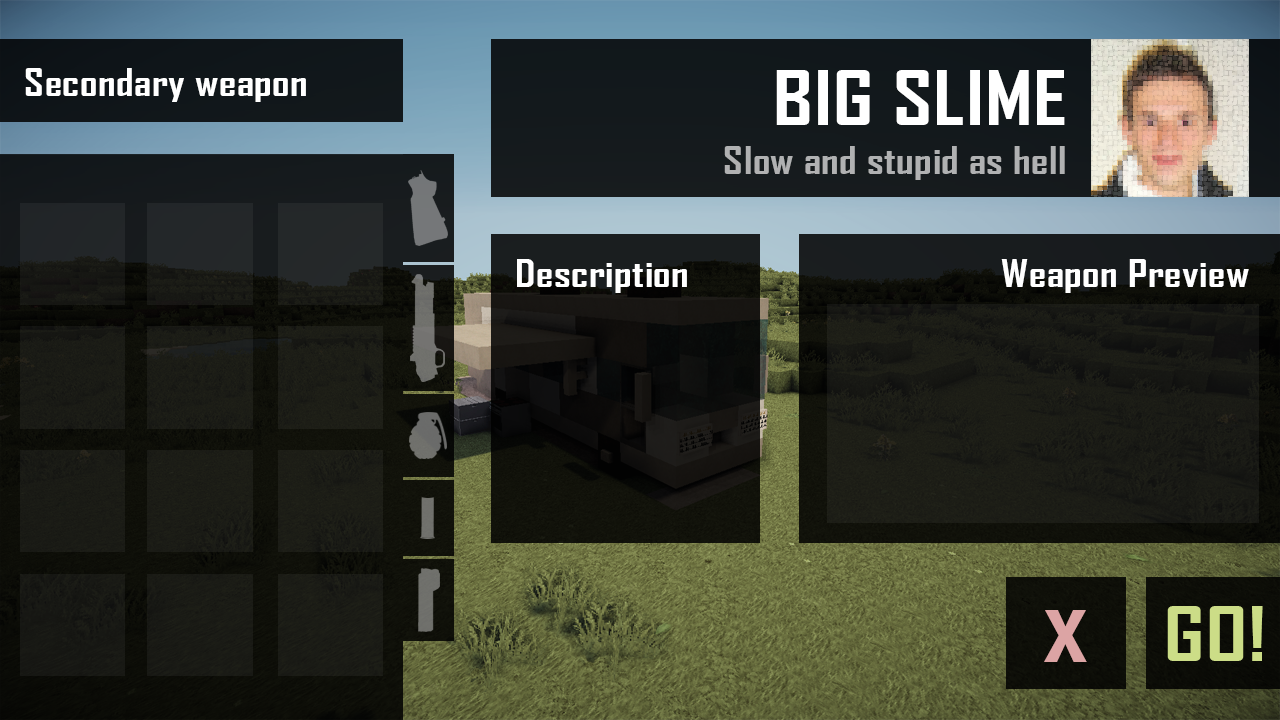
<style>
.page{position:relative;width:1280px;height:720px}
.page>*{position:absolute;margin:0}
.t1{font:36px "AgencyFB-Bold";letter-spacing:0.01em;color:#ffffff;scale:1.2 1}
.t2{font:72px "AgencyFB-Bold";letter-spacing:0.01em;color:#ffffff;scale:1.2 1}
.t3{font:36px "AgencyFB-Bold";letter-spacing:0.01em;color:#b0b1b2;scale:1.2 1}
.t4{font:72px "AgencyFB-Bold";letter-spacing:0.01em;color:#ccdd87;scale:1.2 1}
.t5{font:68px "AgencyFB-Bold";letter-spacing:0.01em;color:#dca4a4;scale:1.5 1}
</style>
<div class="page">
<p class="t1" style="left:25px;top:68px;width:281px;height:34px">Secondary weapon</p>
<p class="t2" style="left:776px;top:70px;width:289px;height:55px">BIG SLIME</p>
<p class="t3" style="left:724px;top:146px;width:341px;height:34px">Slow and stupid as hell</p>
<p class="t1" style="left:517px;top:259px;width:170px;height:34px">Description</p>
<p class="t1" style="left:1001px;top:259px;width:248px;height:34px">Weapon Preview</p>
<p class="t4" style="left:1167px;top:606px;width:96px;height:55px">GO!</p>
<p class="t5" style="left:1044px;top:610px;width:43px;height:52px">X</p>
</div>
